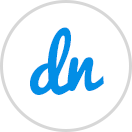
<style>
.page{position:relative;width:132px;height:132px;background:#ffffff}
.page>*{position:absolute;margin:0}
.t1{font:72px "Pacifico-Regular";color:#028ee6}
</style>
<div class="page">
<p class="t1" style="left:30px;top:27px;width:43px;height:68px">d</p>
<p class="t1" style="left:67px;top:57px;width:37px;height:34px">n</p>
</div>
